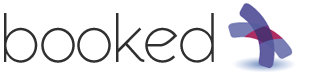
<style>
.page{position:relative;width:317px;height:75px;background:#ffffff}
.page>*{position:absolute;margin:0}
.t1{font:72px "RawengulkSans";color:#2f2f2f}
</style>
<div class="page">
<p class="t1" style="left:4px;top:13px;width:210px;height:50px">booked</p>
</div>
